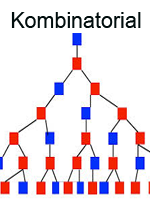
<style>
.page{position:relative;width:150px;height:200px;background:#ffffff}
.page>*{position:absolute;margin:0}
.t1{font:30px "Utsaah";color:#010d0d}
</style>
<div class="page">
<p class="t1" style="left:11px;top:12px;width:130px;height:16px">Kombinatorial</p>
</div>
